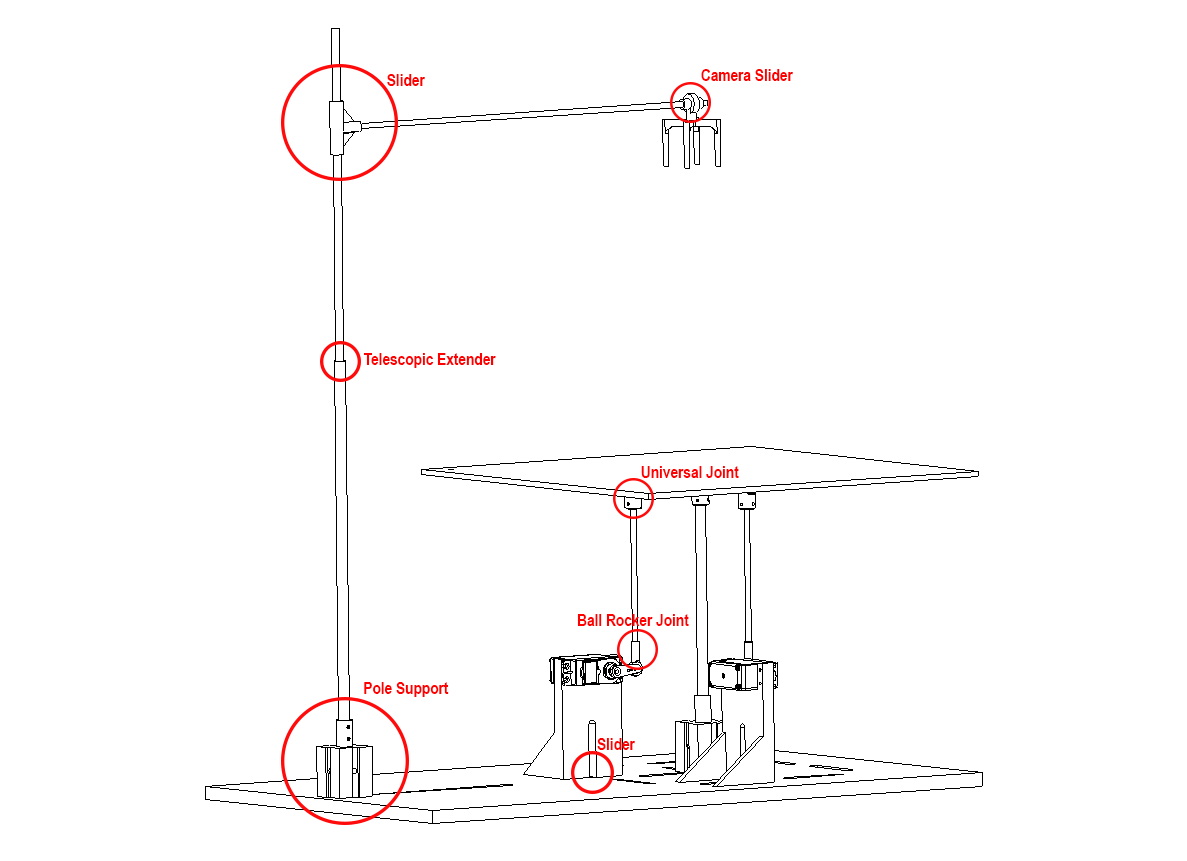
<style>
.page{position:relative;width:1187px;height:861px;background:#ffffff}
.page>*{position:absolute;margin:0}
.t1{font:16.7px "ArialNarrow-Bold";color:#ff0000}
</style>
<div class="page">
<p class="t1" style="left:387px;top:74px;width:38px;height:12px">Slider</p>
<p class="t1" style="left:701px;top:69px;width:92px;height:12px">Camera Slider</p>
<p class="t1" style="left:363px;top:353px;width:133px;height:15px">Telescopic Extender</p>
<p class="t1" style="left:641px;top:466px;width:98px;height:12px">Universal Joint</p>
<p class="t1" style="left:577px;top:614px;width:112px;height:12px">Ball Rocker Joint</p>
<p class="t1" style="left:364px;top:682px;width:85px;height:15px">Pole Support</p>
<p class="t1" style="left:597px;top:738px;width:38px;height:12px">Slider</p>
</div>
